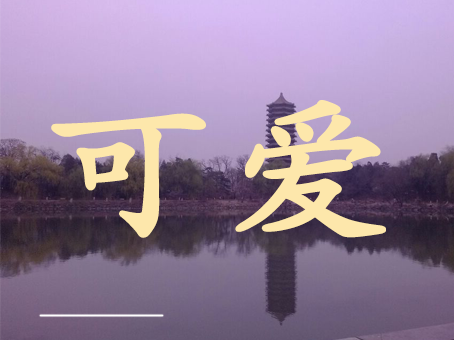
<style>
.page{position:relative;width:454px;height:340px}
.page>*{position:absolute;margin:0}
.t1{font:160px "STKaiti";color:#fde7ab;font-weight:bold;scale:1.1 1}
</style>
<div class="page">
<p class="t1" style="left:51px;top:100px;width:335px;height:138px">可爱</p>
</div>
